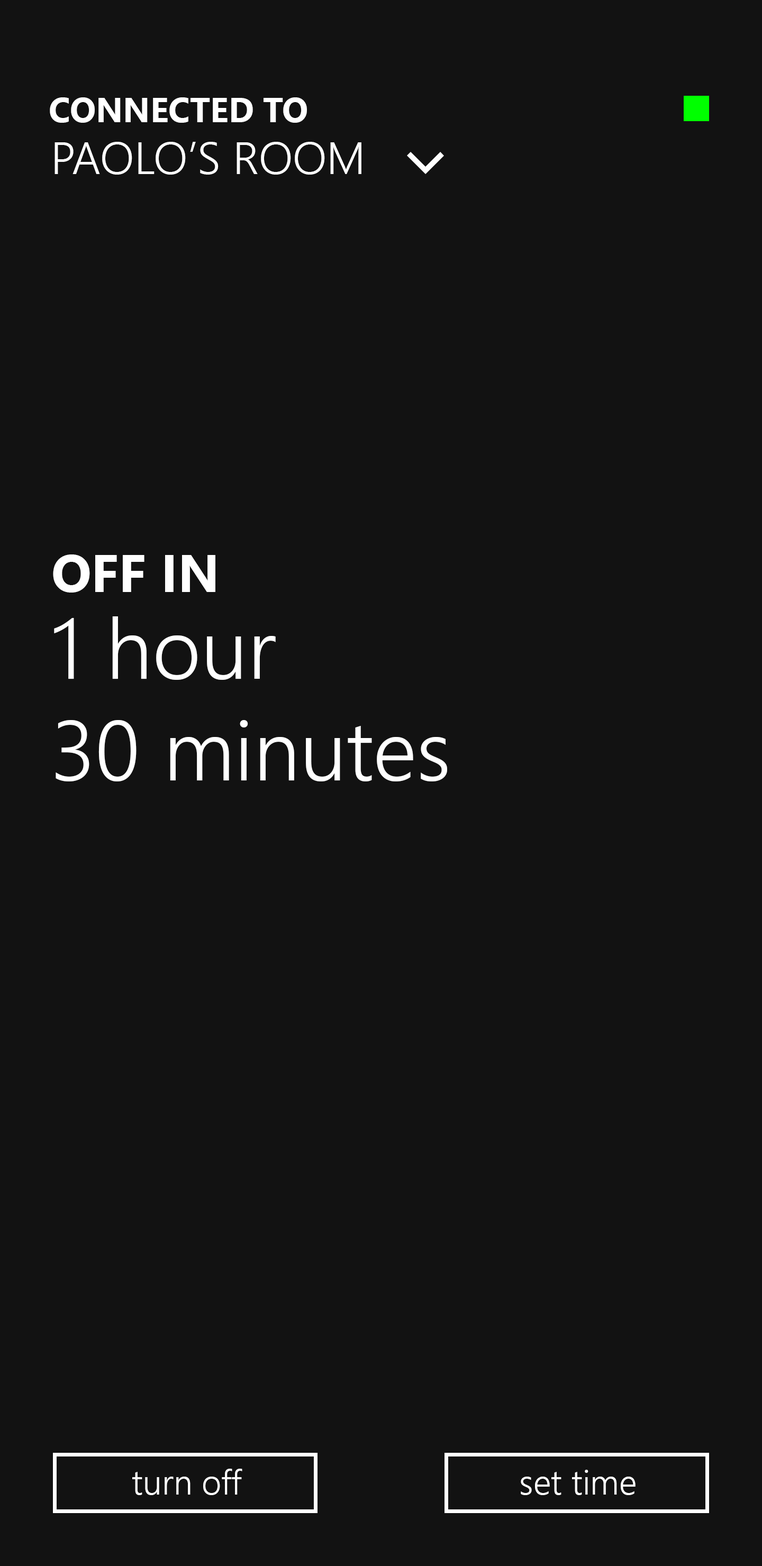
<style>
.page{position:relative;width:762px;height:1566px;background:#121212}
.page>*{position:absolute;margin:0}
.t1{font:34.4px "SegoeUI-Bold";color:#ffffff}
.t2{font:45px "SegoeUI-Semilight";color:#ffffff}
.t3{font:52.9px "SegoeUI-Bold";color:#ffffff}
.t4{font:84.6px "SegoeUI-Semilight";color:#ffffff}
.t5{font:34.5px "SegoeUI-Semilight";color:#ffffff}
</style>
<div class="page">
<p class="t1" style="left:50px;top:97px;width:257px;height:26px">CONNECTED TO</p>
<p class="t2" style="left:54px;top:142px;width:307px;height:33px">PAOLO’S ROOM</p>
<p class="t3" style="left:53px;top:554px;width:162px;height:38px">OFF IN</p>
<p class="t4" style="left:54px;top:616px;width:393px;height:165px">1 hour <br>30 minutes</p>
<p class="t5" style="left:132px;top:1468px;width:110px;height:27px">turn off</p>
<p class="t5" style="left:520px;top:1469px;width:115px;height:26px">set time</p>
</div>
